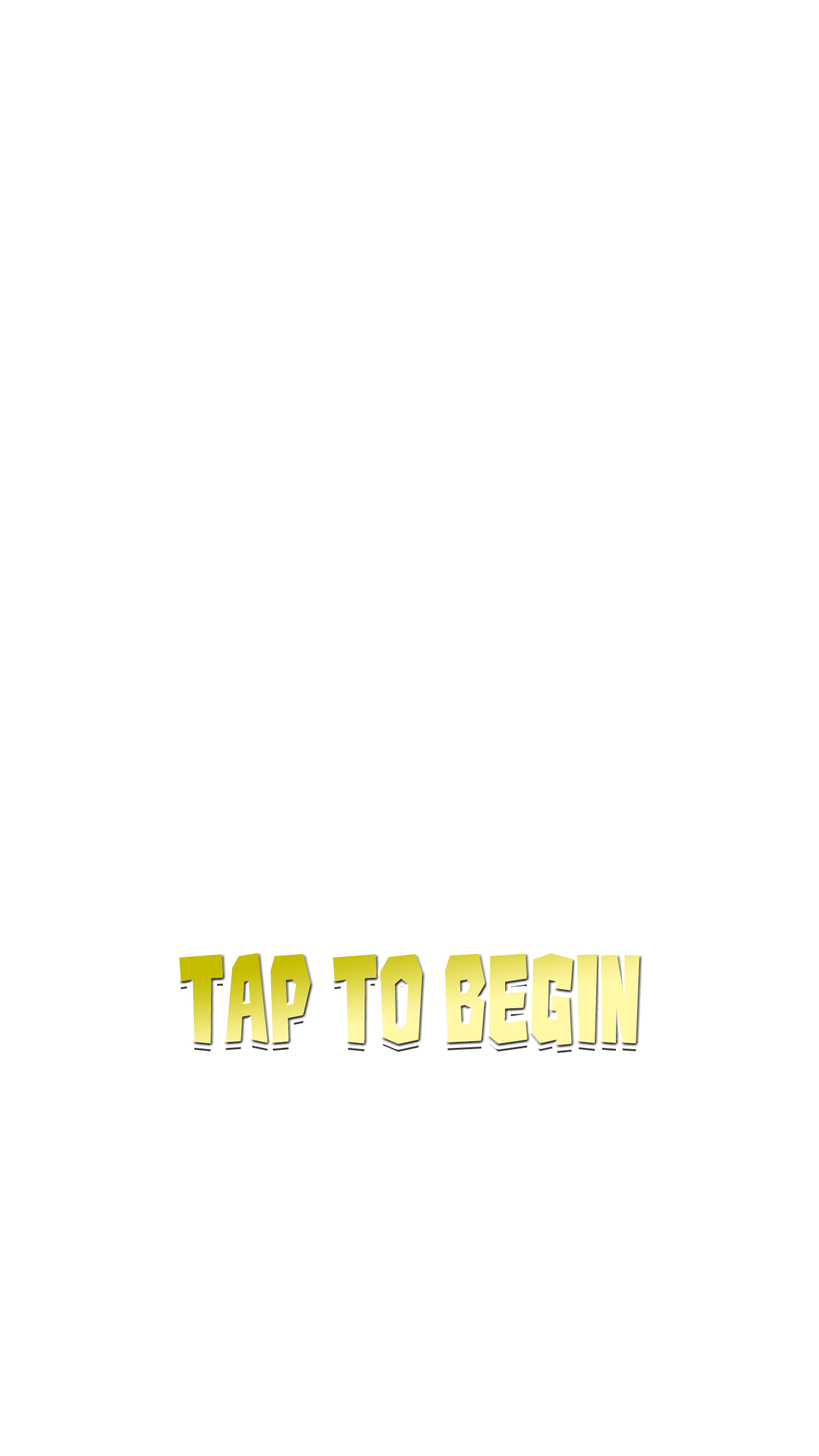
<style>
.page{position:relative;width:819px;height:1456px;background:#ffffff}
.page>*{position:absolute;margin:0}
.t1{font:107.5px "Kaiju-Monster__G"}
</style>
<div class="page">
<p class="t1" style="left:179px;top:953px;width:461px;height:92px">tap to begin</p>
</div>
